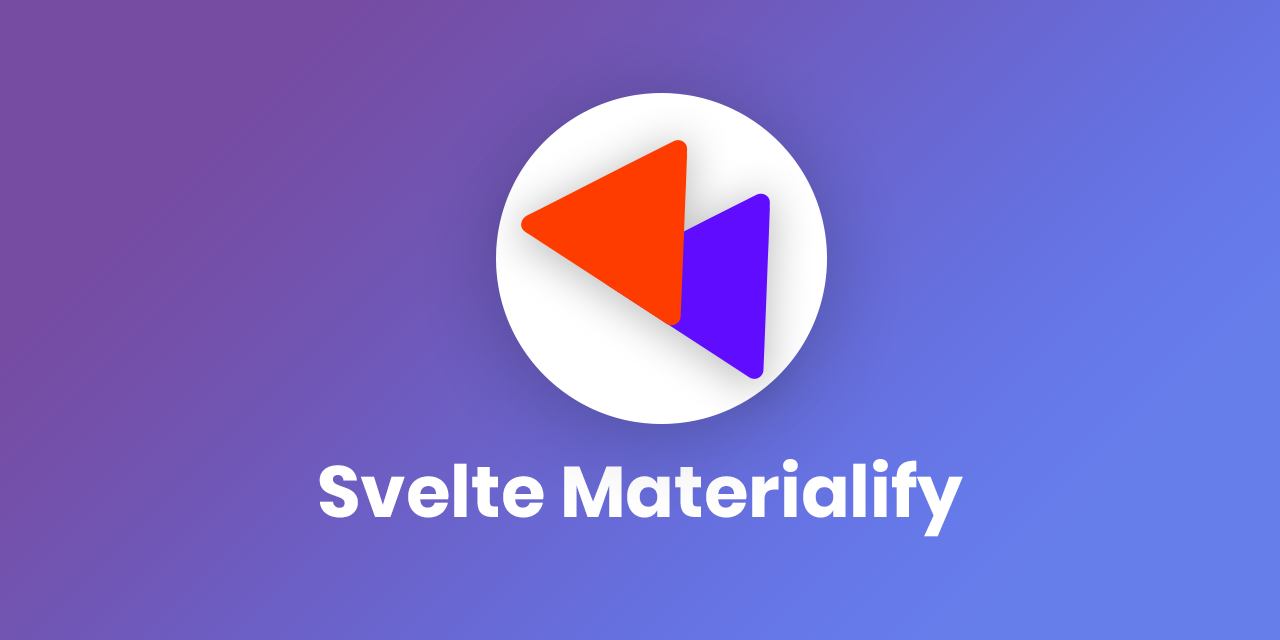
<style>
.page{position:relative;width:1280px;height:640px}
.page>*{position:absolute;margin:0}
.t1{font:72px "Poppins-Bold";color:#ffffff}
</style>
<div class="page">
<p class="t1" style="left:319px;top:459px;width:644px;height:78px">Svelte Materialify</p>
</div>
